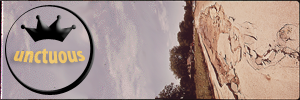
<style>
.page{position:relative;width:300px;height:100px}
.page>*{position:absolute;margin:0}
.t1{font:20px "Myriad-CnBold";color:#eec66d}
</style>
<div class="page">
<p class="t1" style="left:13px;top:48px;width:72px;height:16px">unctuous</p>
</div>
